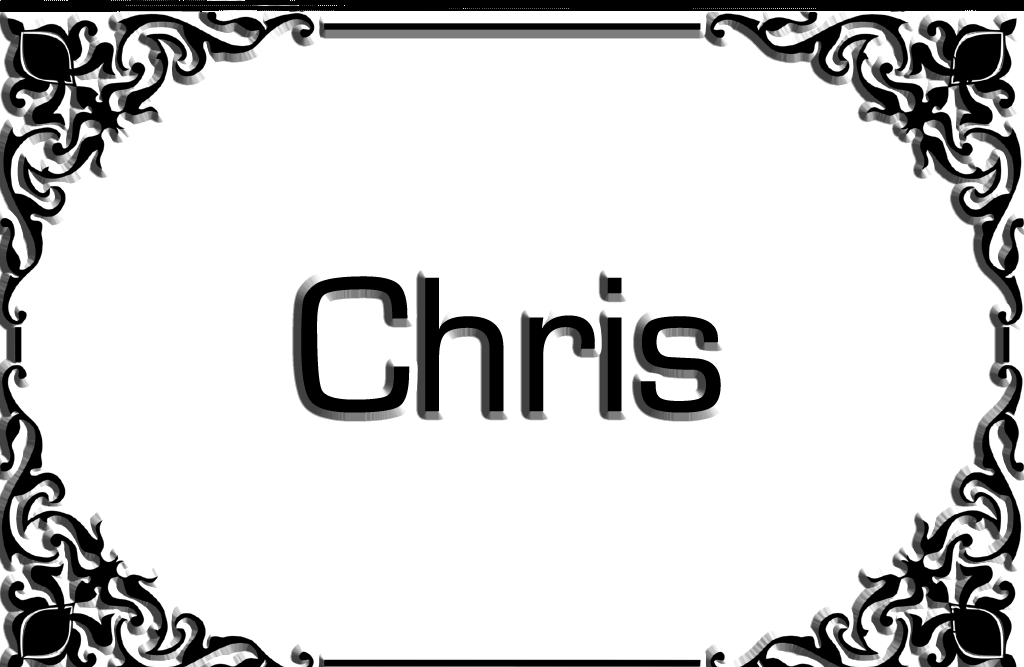
<style>
.page{position:relative;width:1024px;height:667px;background:#ffffff}
.page>*{position:absolute;margin:0}
.t1{font:200px "EurostileRegular"}
</style>
<div class="page">
<p class="t1" style="left:301px;top:265px;width:420px;height:137px">Chris</p>
</div>
